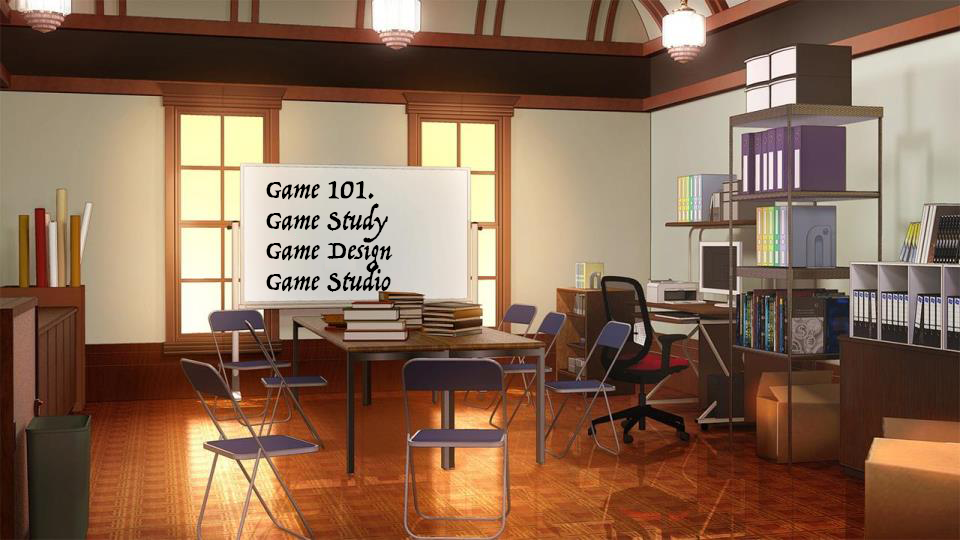
<style>
.page{position:relative;width:960px;height:540px}
.page>*{position:absolute;margin:0}
.t1{font:29.3px/30.7px "Trattatello";color:#000000}
</style>
<div class="page">
<p class="t1" style="left:266px;top:181px;width:127px;height:111px">Game 101.<br>Game Study<br>Game Design<br>Game Studio</p>
</div>
